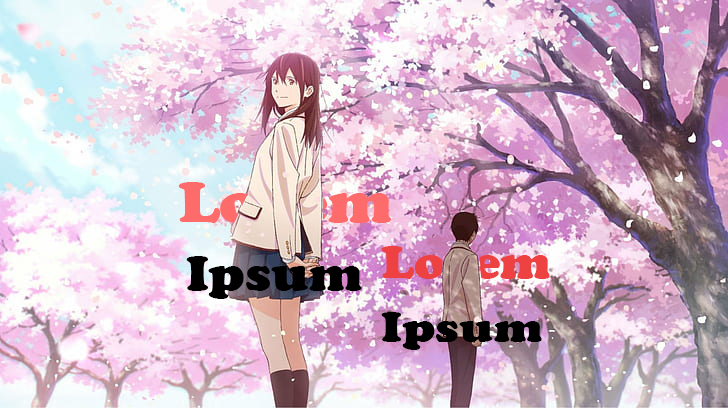
<style>
.page{position:relative;width:728px;height:408px}
.page>*{position:absolute;margin:0}
.t1{font:58.8px "CooperBlack";color:#fd6b6b;scale:1.12 1}
.t2{font:46.8px "CooperBlack";color:#ee4141;scale:1.12 1}
.t3{font:49.5px "CooperBlack";color:#000000;scale:1.12 1}
.t4{font:45.2px "CooperBlack";color:#000000;scale:1.12 1}
</style>
<div class="page">
<p class="t1" style="left:178px;top:182px;width:213px;height:41px">Lorem</p>
<p class="t2" style="left:381px;top:246px;width:169px;height:33px">Lorem</p>
<p class="t3" style="left:186px;top:256px;width:176px;height:43px">Ipsum</p>
<p class="t4" style="left:381px;top:312px;width:161px;height:38px">Ipsum</p>
</div>
